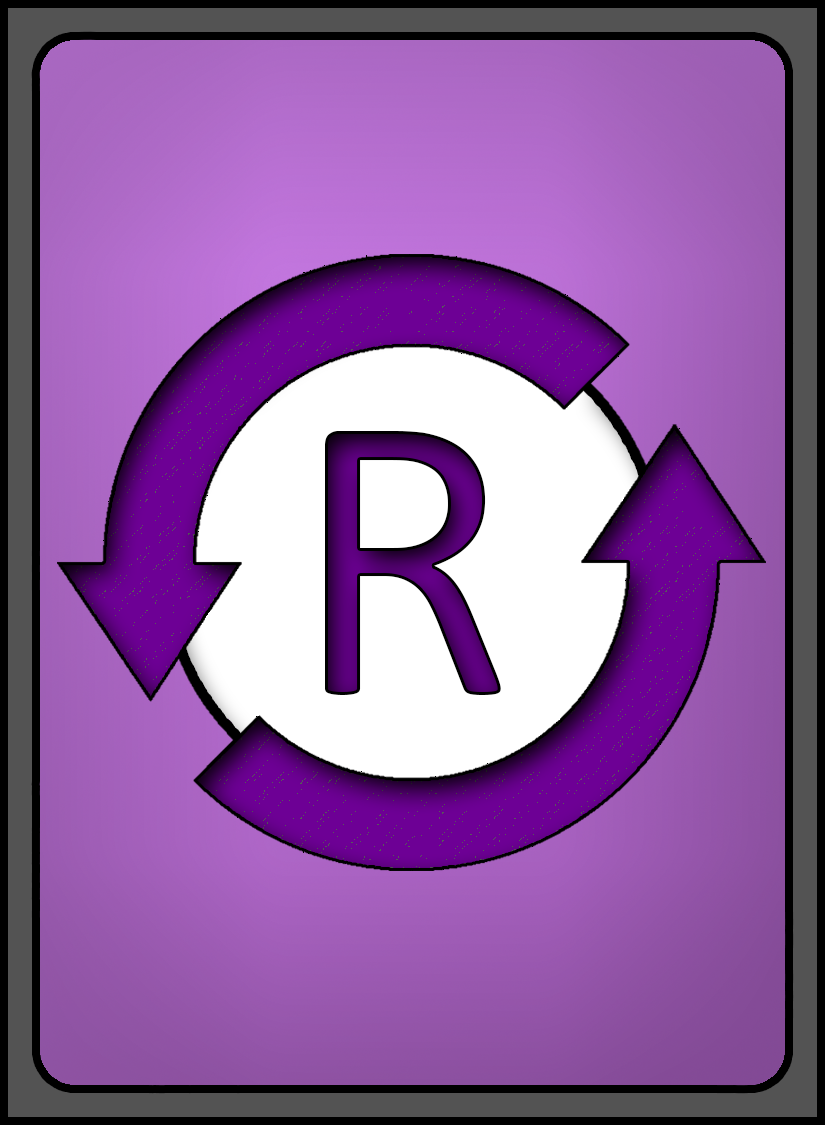
<style>
.page{position:relative;width:825px;height:1125px}
.page>*{position:absolute;margin:0}
.t1{font:416.7px "Calibri"}
</style>
<div class="page">
<p class="t1" style="left:325px;top:431px;width:176px;height:264px">R</p>
</div>
